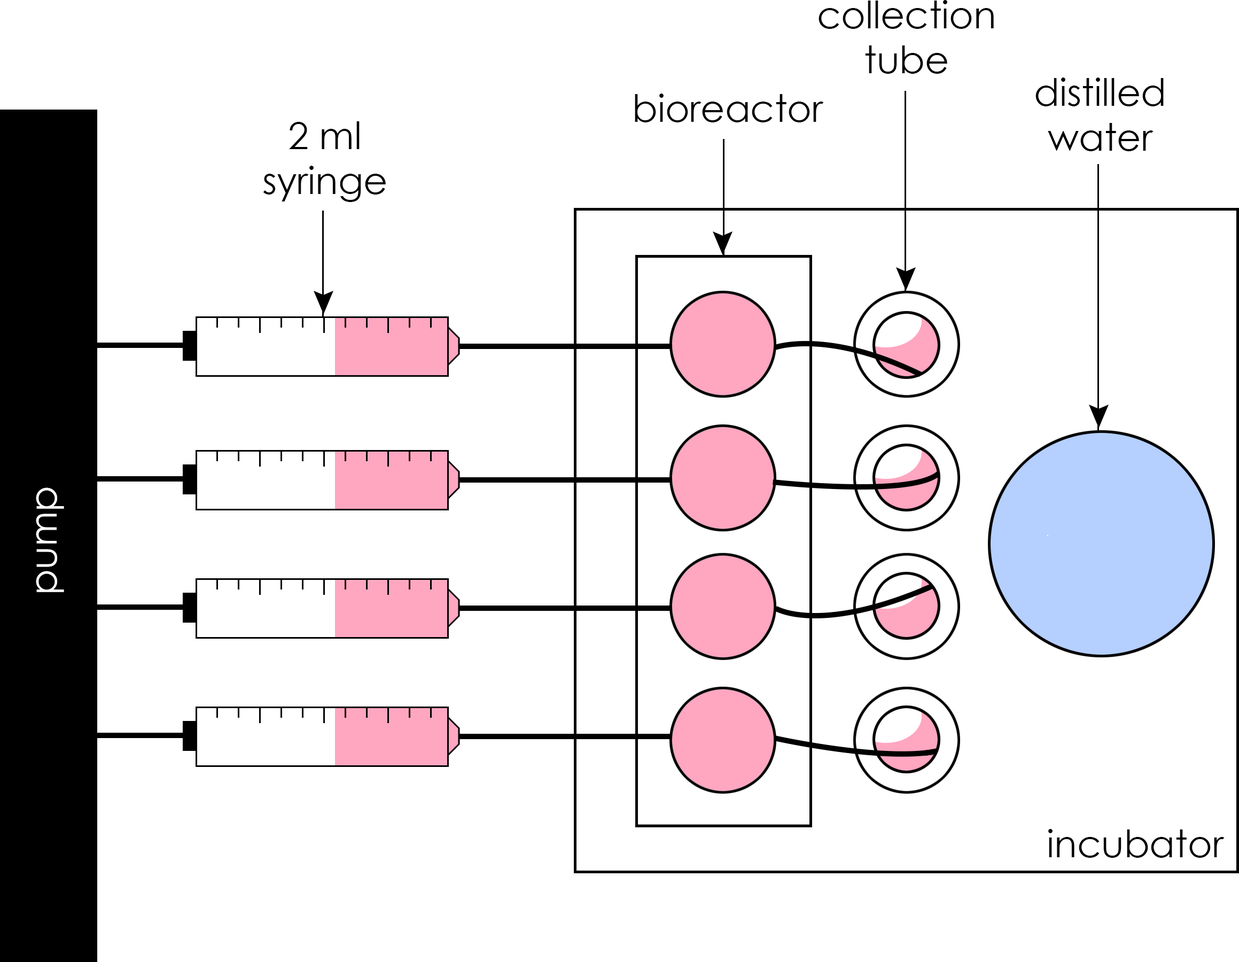
<style>
.page{position:relative;width:1239px;height:962px;background:#ffffff}
.page>*{position:absolute;margin:0}
.t1{font:37.4px "CenturyGothic";color:#000000}
.t2{font:37.4px "CenturyGothic";color:#ffffff}
</style>
<div class="page">
<p class="t1" style="left:819px;top:0px;width:175px;height:74px;text-align:center">collection<br>tube</p>
<p class="t1" style="left:1036px;top:77px;width:128px;height:74px;text-align:center">distilled<br>water</p>
<p class="t1" style="left:635px;top:94px;width:189px;height:28px">bioreactor</p>
<p class="t1" style="left:263px;top:121px;width:123px;height:81px;text-align:center">2 ml<br>syringe</p>
<p class="t2" style="left:36px;top:487px;width:28px;height:105px;rotate:-90deg">pump</p>
<p class="t1" style="left:1049px;top:829px;width:176px;height:29px">incubator</p>
</div>
